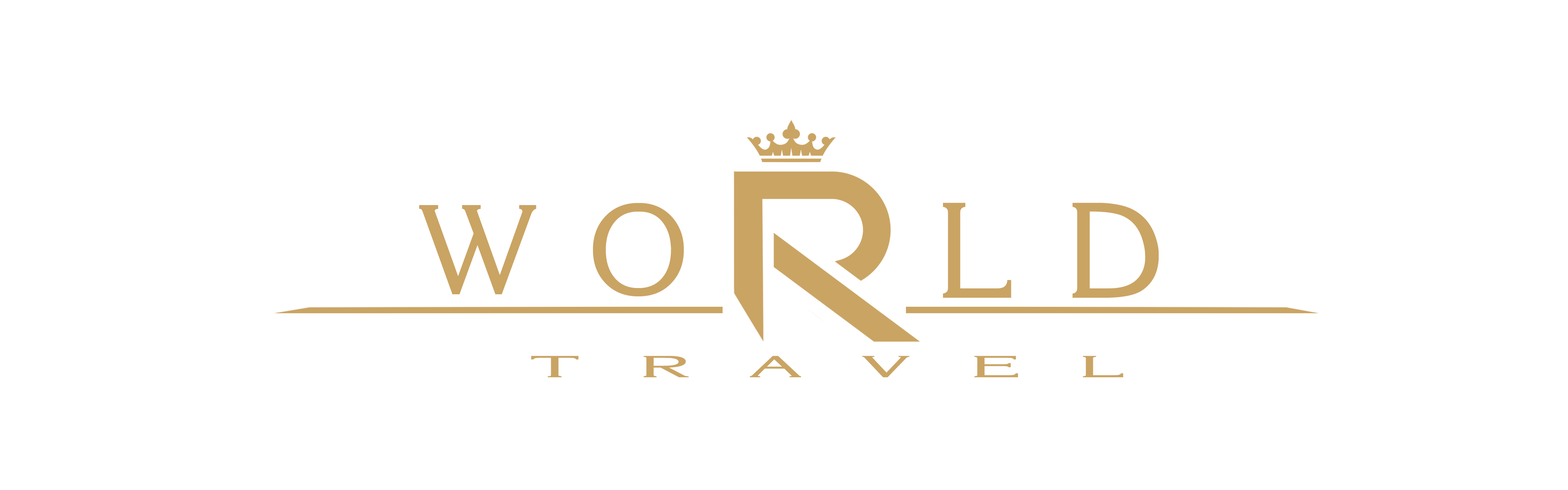
<style>
.page{position:relative;width:1568px;height:490px;background:#ffffff}
.page>*{position:absolute;margin:0}
.t1{font:137.5px "Korinna.kz";color:#caa463}
.t2{font:146.2px "Korinna.kz";color:#caa463}
.t3{font:32.8px "Korinna.kz";color:#caa463;scale:2.63 1}
</style>
<div class="page">
<p class="t1" style="left:419px;top:203px;width:265px;height:93px">W O</p>
<p class="t2" style="left:943px;top:203px;width:216px;height:95px">L D</p>
<p class="t3" style="left:531px;top:356px;width:592px;height:21px">T  R  A  V  E  L</p>
</div>
